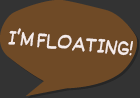
<style>
.page{position:relative;width:140px;height:98px;background:#6f4a26}
.page>*{position:absolute;margin:0}
.t1{font:22px "SuplexmentaryComicNC";color:#f5ebe9;scale:0.8 1}
</style>
<div class="page">
<p class="t1" style="left:8px;top:28px;width:125px;height:28px;rotate:5deg">I’M FLOATING!</p>
</div>
